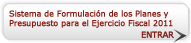
<style>
.page{position:relative;width:191px;height:43px}
.page>*{position:absolute;margin:0}
.t1{font:8px "Verdana";letter-spacing:-0.025em;color:#881811;font-weight:bold}
.t2{font:13.8px "Arrows1-Regular";color:#3f3f3f;text-transform:uppercase}
.t3{font:8px "Verdana";letter-spacing:-0.025em;font-weight:bold}
</style>
<div class="page">
<p class="t1" style="left:9px;top:10px;width:164px;height:18px">Sistema de Formulación de los Planes y <br>Presupuesto para el Ejercicio Fiscal 2011</p>
<p class="t2" style="left:173px;top:29px;width:14px;height:14px">r</p>
<p class="t1" style="left:141px;top:31px;width:33px;height:7px">ENTRAR</p>
<p class="t3" style="left:142px;top:31px;width:32px;height:7px">ENTRAR</p>
</div>
